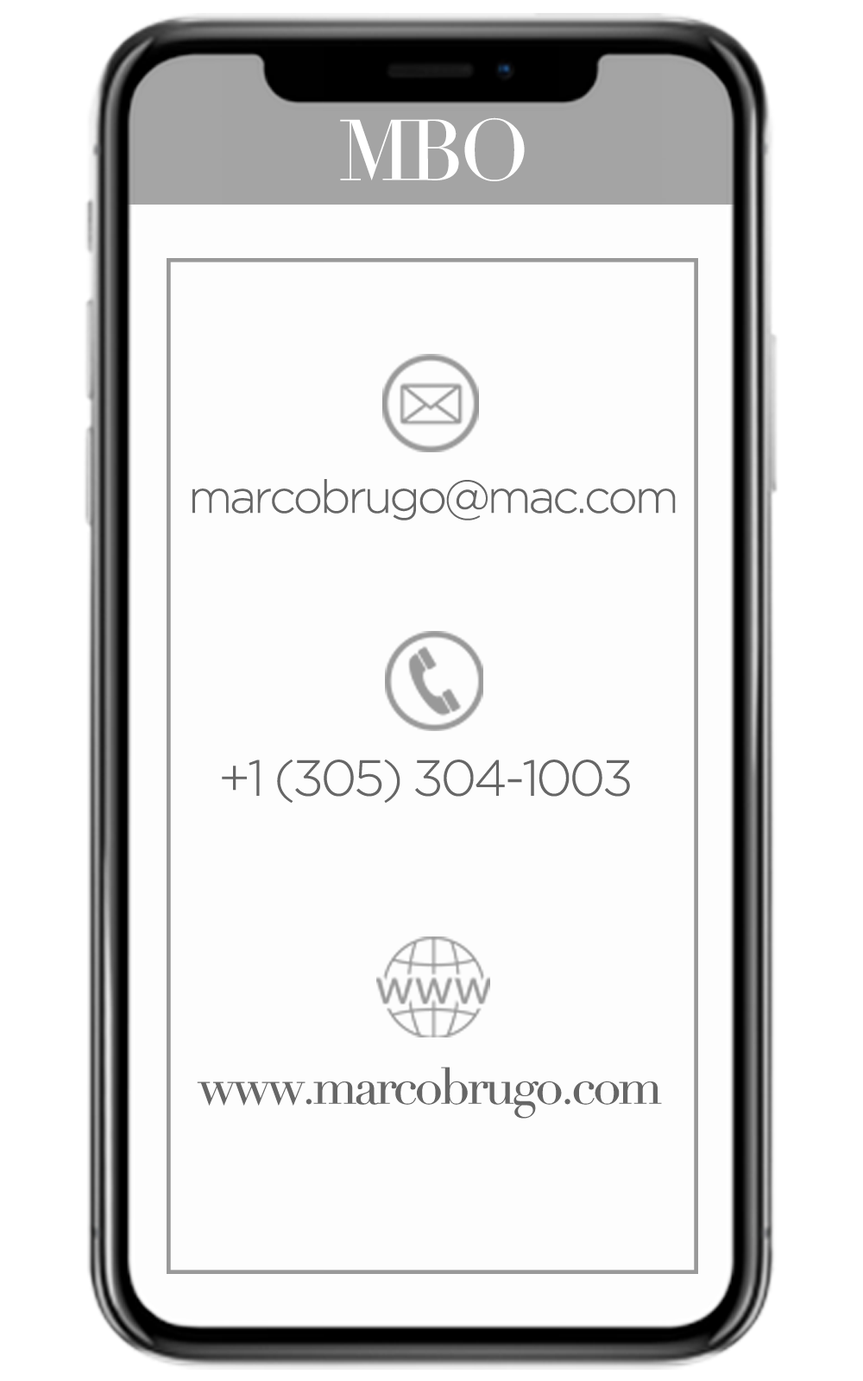
<style>
.page{position:relative;width:863px;height:1381px;background:#fdfdfd}
.page>*{position:absolute;margin:0}
.t1{font:84.4px "Didot";letter-spacing:-0.06em;color:#ffffff}
.t2{font:46px "Gotham-Light";letter-spacing:-0.06em;color:#666666}
.t3{font:50.4px "Gotham-Light";letter-spacing:-0.06em;color:#666666}
.t4{font:50.4px "Didot";letter-spacing:-0.06em;color:#666666}
</style>
<div class="page">
<p class="t1" style="left:340px;top:117px;width:185px;height:64px">MBO</p>
<p class="t2" style="left:193px;top:479px;width:483px;height:42px">marcobrugo@mac.com</p>
<p class="t3" style="left:222px;top:760px;width:408px;height:43px">+1 (305) 304-1003</p>
<p class="t4" style="left:197px;top:1067px;width:465px;height:52px">www.marcobrugo.com</p>
</div>
